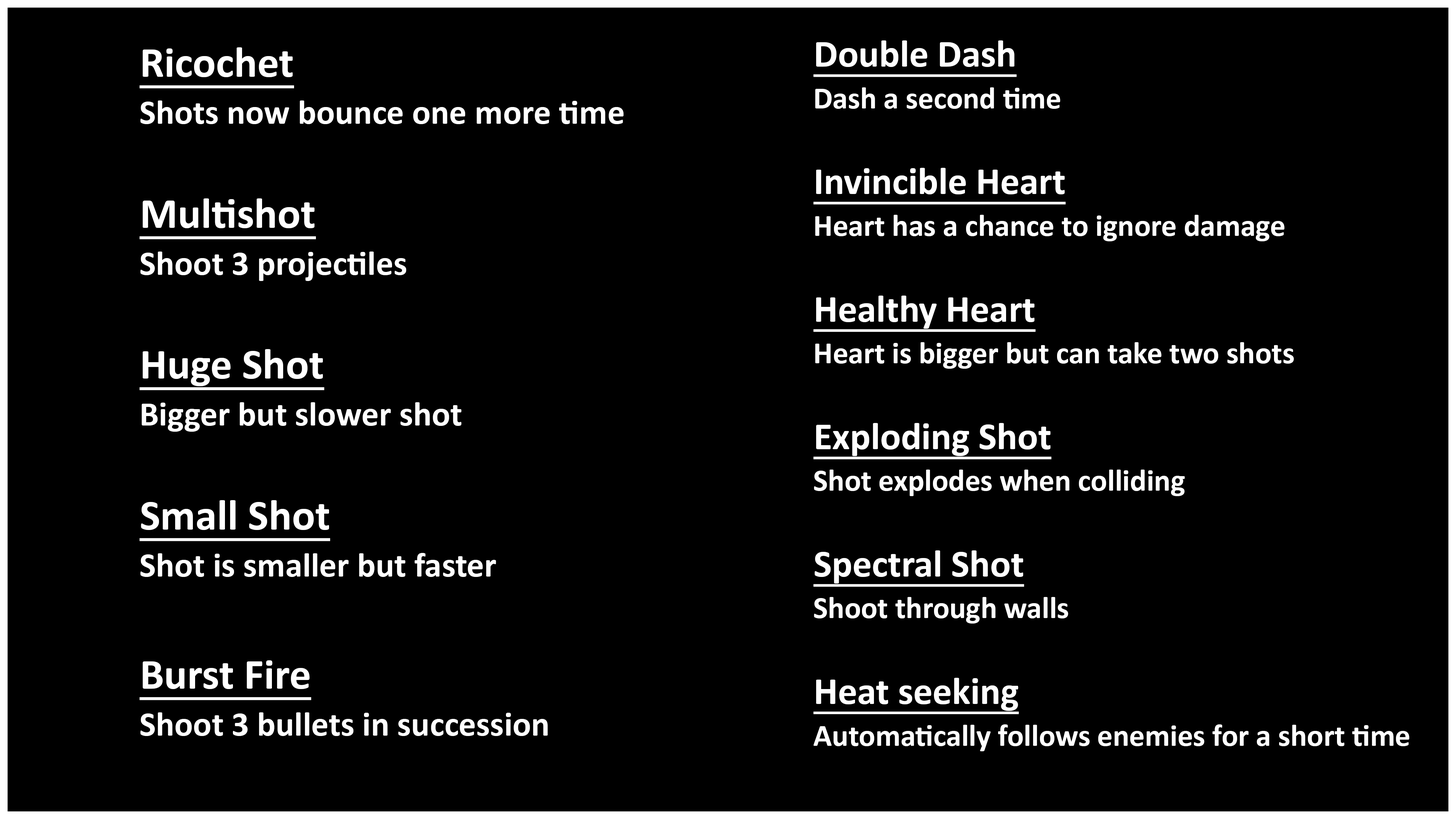
<style>
.page{position:relative;width:1456px;height:819px;background:#000000}
.page>*{position:absolute;margin:0}
.t1{font:38.5px "Calibri-Bold";color:#ffffff;text-decoration:underline}
.t2{font:43.4px "Calibri-Bold";color:#ffffff;text-decoration:underline}
.t3{font:30.8px "Calibri-Bold";color:#ffffff}
.t4{font:34.7px "Calibri-Bold";color:#ffffff}
</style>
<div class="page">
<p class="t1" style="left:813px;top:40px;width:204px;height:37px">Double Dash</p>
<p class="t2" style="left:139px;top:47px;width:155px;height:41px">Ricochet</p>
<p class="t3" style="left:815px;top:87px;width:245px;height:22px">Dash a second time</p>
<p class="t4" style="left:140px;top:100px;width:484px;height:24px">Shots now bounce one more time</p>
<p class="t1" style="left:813px;top:168px;width:253px;height:37px">Invincible Heart</p>
<p class="t2" style="left:139px;top:198px;width:177px;height:42px">Multishot</p>
<p class="t3" style="left:815px;top:215px;width:470px;height:26px">Heart has a chance to ignore damage</p>
<p class="t4" style="left:140px;top:252px;width:266px;height:29px">Shoot 3 projectiles</p>
<p class="t1" style="left:813px;top:296px;width:223px;height:36px">Healthy Heart</p>
<p class="t2" style="left:139px;top:349px;width:185px;height:41px">Huge Shot</p>
<p class="t3" style="left:815px;top:342px;width:479px;height:27px">Heart is bigger but can take two shots</p>
<p class="t4" style="left:142px;top:402px;width:320px;height:30px">Bigger but slower shot</p>
<p class="t1" style="left:813px;top:423px;width:239px;height:36px">Exploding Shot</p>
<p class="t3" style="left:814px;top:470px;width:371px;height:26px">Shot explodes when colliding</p>
<p class="t2" style="left:139px;top:500px;width:191px;height:41px">Small Shot</p>
<p class="t4" style="left:140px;top:553px;width:356px;height:24px">Shot is smaller but faster</p>
<p class="t1" style="left:813px;top:550px;width:211px;height:37px">Spectral Shot</p>
<p class="t3" style="left:814px;top:597px;width:254px;height:27px">Shoot through walls</p>
<p class="t2" style="left:139px;top:660px;width:172px;height:40px">Burst Fire</p>
<p class="t1" style="left:813px;top:678px;width:206px;height:36px">Heat seeking</p>
<p class="t4" style="left:140px;top:712px;width:408px;height:24px">Shoot 3 bullets in succession</p>
<p class="t3" style="left:814px;top:724px;width:595px;height:27px">Automatically follows enemies for a short time</p>
</div>
